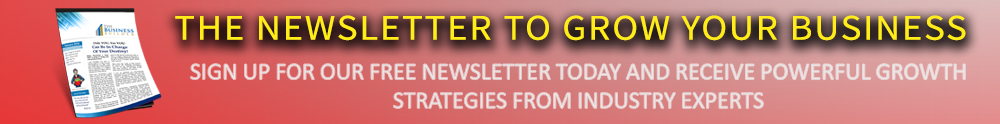
<style>
.page{position:relative;width:1000px;height:124px}
.page>*{position:absolute;margin:0}
.t1{font:36px "SourceSansPro-Regular";letter-spacing:0.05em;color:#ffec18;scale:1.1 1}
.t2{font:24px "Calibri";letter-spacing:-0.01em;color:#e8e8e8}
</style>
<div class="page">
<p class="t1" style="left:175px;top:15px;width:791px;height:26px">THE NEWSLETTER TO GROW YOUR BUSINESS</p>
<p class="t2" style="left:190px;top:63px;width:776px;height:46px;text-align:center">SIGN UP FOR OUR FREE NEWSLETTER TODAY AND RECEIVE POWERFUL GROWTH STRATEGIES FROM INDUSTRY EXPERTS</p>
</div>
